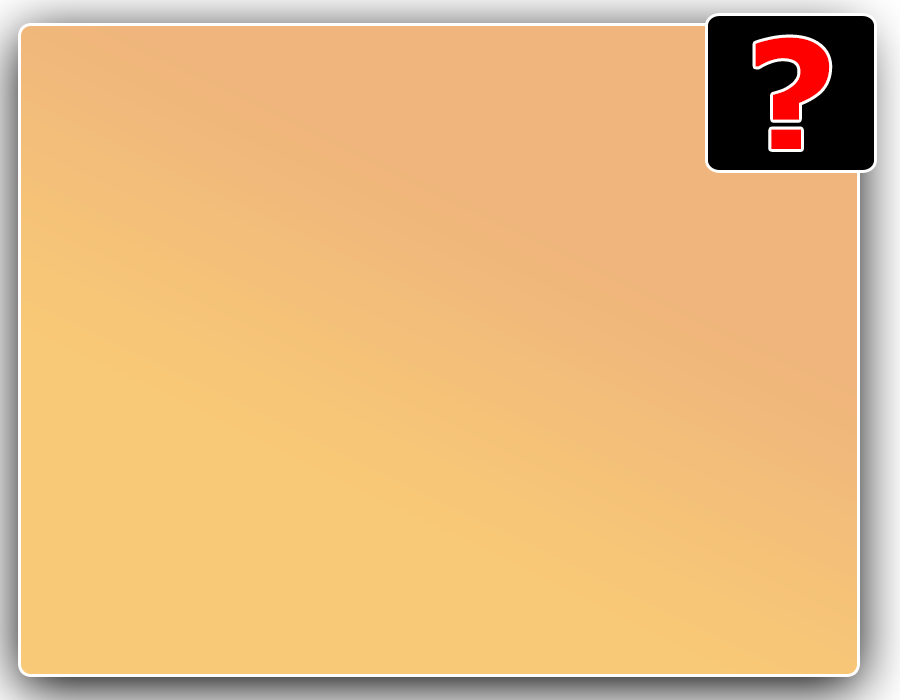
<style>
.page{position:relative;width:900px;height:700px;background:#f8c977}
.page>*{position:absolute;margin:0}
.t1{font:150px "Verdana-Bold";color:#ff0000}
</style>
<div class="page">
<p class="t1" style="left:755px;top:37px;width:75px;height:112px">?</p>
</div>
